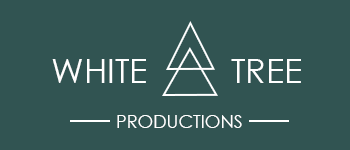
<style>
.page{position:relative;width:350px;height:150px;background:#315452}
.page>*{position:absolute;margin:0}
.t1{font:34px "CenturyGothic";color:#ffffff}
.t2{font:18px "CenturyGothic";color:#ffffff}
</style>
<div class="page">
<p class="t1" style="left:52px;top:59px;width:94px;height:24px">WHITE</p>
<p class="t1" style="left:231px;top:59px;width:70px;height:24px">TREE</p>
<p class="t2" style="left:117px;top:115px;width:125px;height:13px">PRODUCTIONS</p>
</div>
